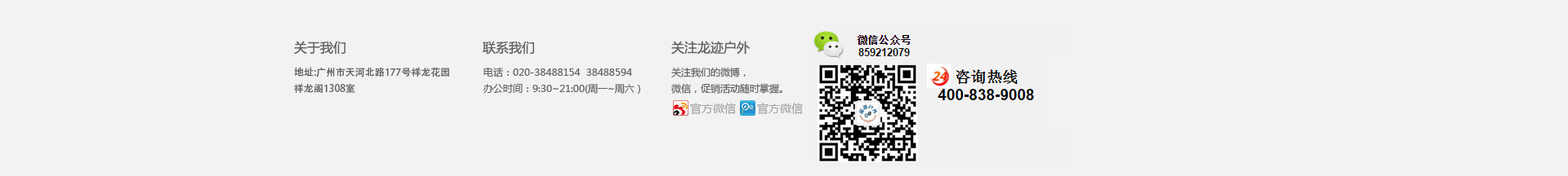
<style>
.page{position:relative;width:1568px;height:176px;background:#f2f2f2}
.page>*{position:absolute;margin:0}
.t1{font:13.1px "MicrosoftYaHei";color:#626262}
.t2{font:9.8px/16.3px "AdobeHeitiStd-Regular";color:#626262}
.t3{font:9.8px/16.3px "MicrosoftYaHei";color:#626262}
.t4{font:11.4px "MicrosoftYaHei";color:#a4a4a4}
</style>
<div class="page">
<p class="t1" style="left:294px;top:41px;width:51px;height:14px">关于我们</p>
<p class="t1" style="left:483px;top:41px;width:51px;height:14px">联系我们</p>
<p class="t1" style="left:671px;top:41px;width:79px;height:14px">关注龙迹户外</p>
<p class="t2" style="left:294px;top:67px;width:155px;height:26px">地址:广州市天河北路177号祥龙花园<br>祥龙阁1308室</p>
<p class="t3" style="left:483px;top:68px;width:157px;height:26px">电话：020-38488154  38488594 <br>办公时间：9:30~21:00(周一~周六）</p>
<p class="t3" style="left:671px;top:67px;width:111px;height:27px">关注我们的微博，<br>微信，促销活动随时掌握。</p>
<p class="t4" style="left:690px;top:103px;width:46px;height:12px">官方微信</p>
<p class="t4" style="left:757px;top:103px;width:46px;height:12px">官方微信</p>
</div>
